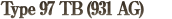
<style>
.page{position:relative;width:172px;height:19px;background:#ffffff}
.page>*{position:absolute;margin:0}
.t1{font:18px "RyuminPro-ExBold";letter-spacing:-0.08em;color:#4a3f32;font-weight:bold;scale:0.9 1}
</style>
<div class="page">
<p class="t1" style="left:0px;top:0px;width:144px;height:19px">Type 97 TB (931 AG)</p>
</div>
